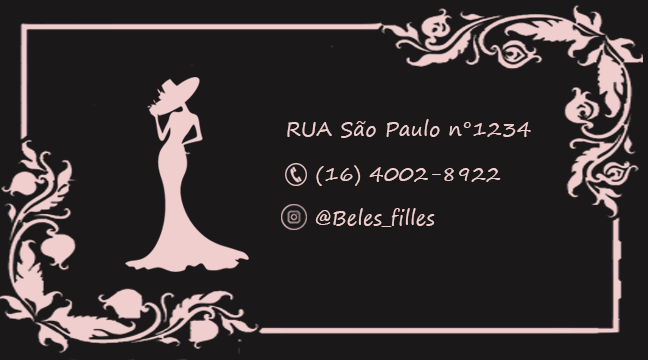
<style>
.page{position:relative;width:648px;height:360px;background:#1a1819}
.page>*{position:absolute;margin:0}
.t1{font:20.3px "SegoePrint";color:#f0cece}
</style>
<div class="page">
<p class="t1" style="left:287px;top:119px;width:244px;height:19px">RUA São Paulo n°1234</p>
<p class="t1" style="left:316px;top:165px;width:185px;height:21px">(16) 4002-8922</p>
<p class="t1" style="left:315px;top:208px;width:120px;height:19px">@Beles_filles</p>
</div>
